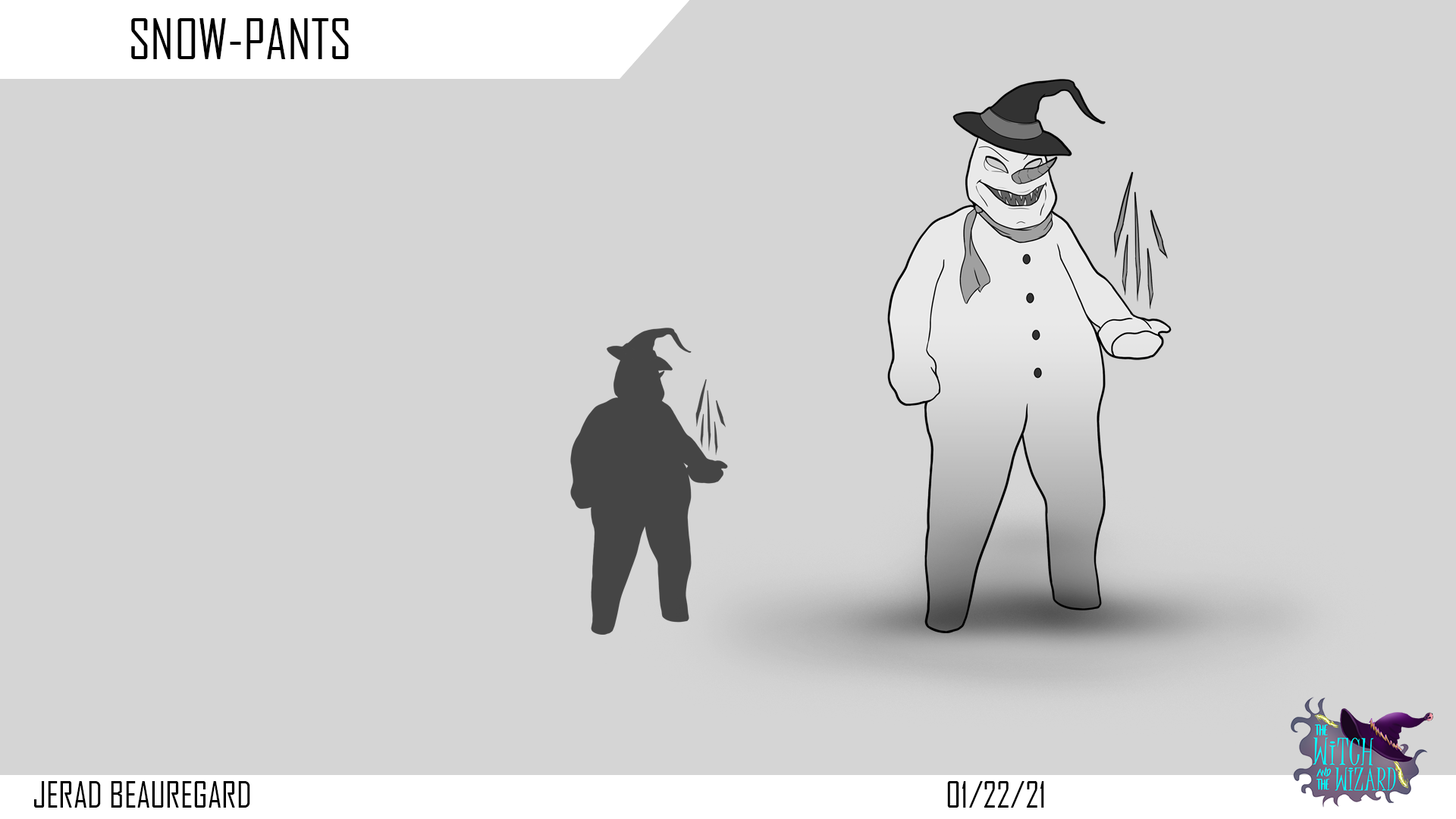
<style>
.page{position:relative;width:1456px;height:819px;background:#d5d5d5}
.page>*{position:absolute;margin:0}
.t1{font:53.9px "AgencyFB-Reg";color:#000000}
.t2{font:34.8px "AgencyFB-Reg";color:#000000}
</style>
<div class="page">
<p class="t1" style="left:131px;top:18px;width:218px;height:41px">SNOW-PANTS</p>
<p class="t2" style="left:34px;top:781px;width:216px;height:27px">JERAD BEAUREGARD</p>
<p class="t2" style="left:947px;top:781px;width:97px;height:27px">01/22/21</p>
</div>
